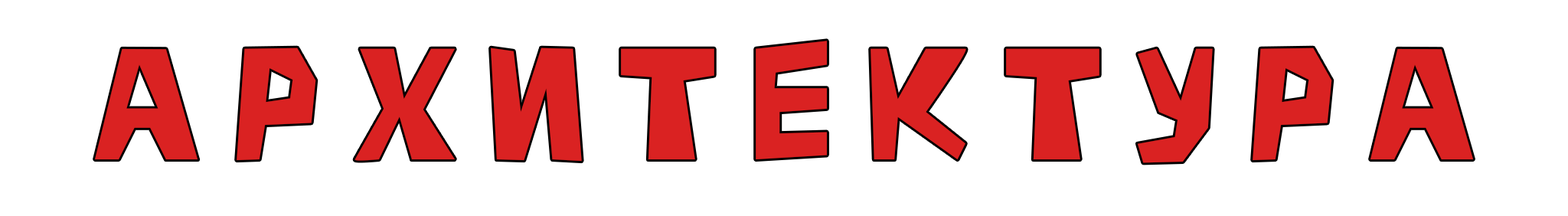
<style>
.page{position:relative;width:1568px;height:216px;background:#ffffff}
.page>*{position:absolute;margin:0}
.t1{font:161.5px "ZeroCool";letter-spacing:0.2em;color:#da2222}
</style>
<div class="page">
<p class="t1" style="left:95px;top:41px;width:1378px;height:122px">Архитектура</p>
</div>
